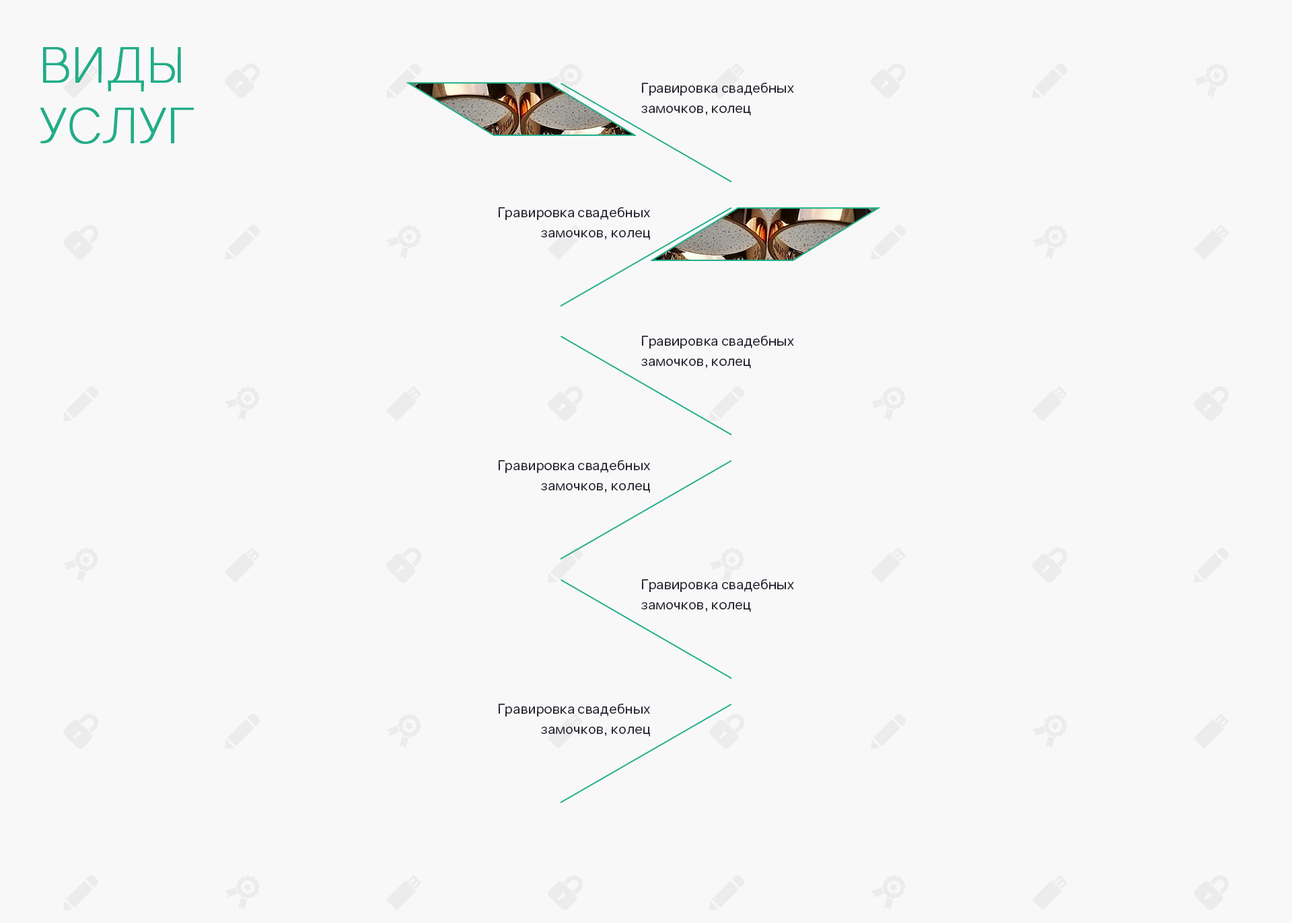
<style>
.page{position:relative;width:1292px;height:923px;background:#f8f8f8}
.page>*{position:absolute;margin:0}
.t1{font:48.4px/60.6px "Gravity-Light";color:#20ae88;font-weight:bold}
.t2{font:13.5px/20.2px "Gravity-Regular";color:#232631}
.t3{font:13.4px/20.1px "Gravity-Regular";color:#232631}
</style>
<div class="page">
<p class="t1" style="left:40px;top:47px;width:154px;height:97px">ВИДЫ<br>УСЛУГ</p>
<p class="t2" style="left:641px;top:83px;width:153px;height:33px">Гравировка свадебных замочков, колец</p>
<p class="t3" style="left:498px;top:207px;width:153px;height:33px;text-align:right">Гравировка свадебных замочков, колец</p>
<p class="t2" style="left:641px;top:336px;width:153px;height:33px">Гравировка свадебных замочков, колец</p>
<p class="t3" style="left:498px;top:460px;width:153px;height:33px;text-align:right">Гравировка свадебных замочков, колец</p>
<p class="t2" style="left:641px;top:579px;width:153px;height:33px">Гравировка свадебных замочков, колец</p>
<p class="t3" style="left:498px;top:704px;width:153px;height:33px;text-align:right">Гравировка свадебных замочков, колец</p>
</div>
